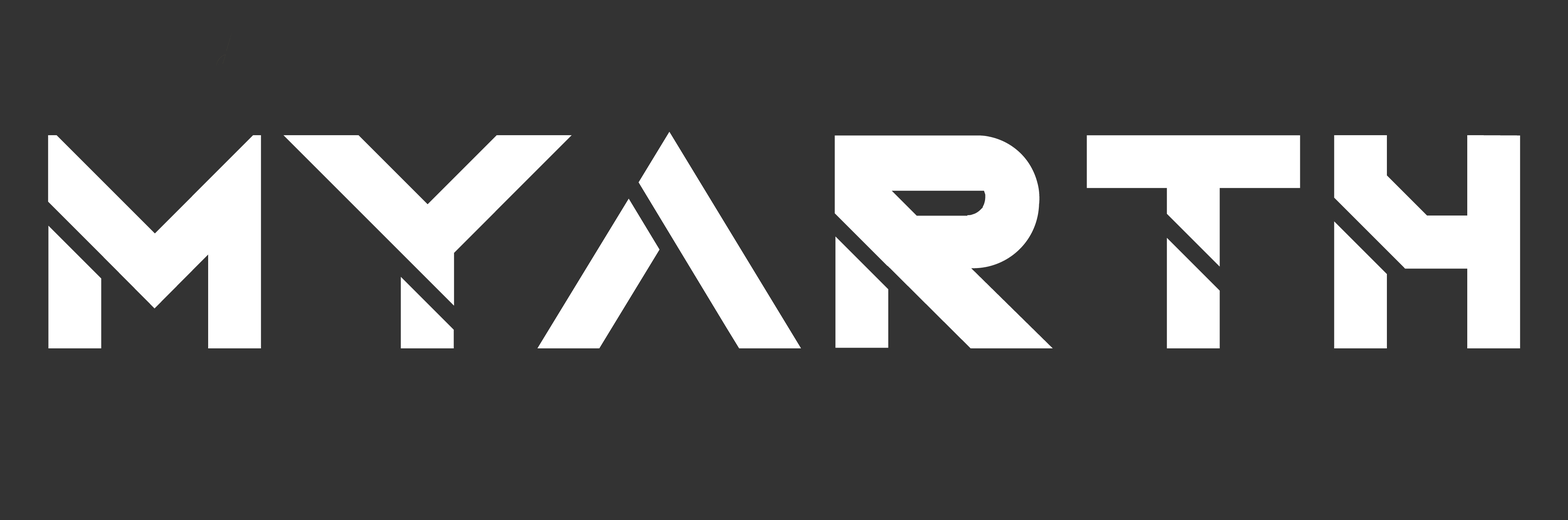
<style>
.page{position:relative;width:1568px;height:520px;background:#333333}
.page>*{position:absolute;margin:0}
.t1{font:310.3px "QuantumRegular";letter-spacing:0.01em;color:#ffffff}
</style>
<div class="page">
<p class="t1" style="left:48px;top:132px;width:1472px;height:216px">MYARTH</p>
</div>
